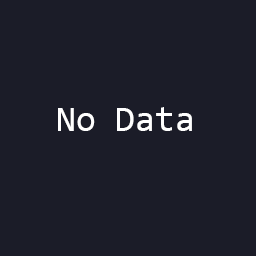
<style>
.page{position:relative;width:256px;height:256px;background:#1b1c28}
.page>*{position:absolute;margin:0}
.t1{font:36px "Consolas";color:#ffffff}
</style>
<div class="page">
<p class="t1" style="left:58px;top:107px;width:134px;height:24px">No Data</p>
</div>
